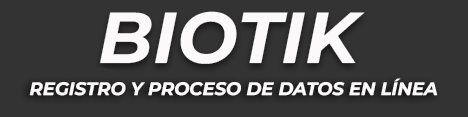
<style>
.page{position:relative;width:468px;height:117px;background:#333333}
.page>*{position:absolute;margin:0}
.t1{font:18px "MontserratItalic-BoldItalic";color:#fbf9f9}
</style>
<div class="page">
<p class="t1" style="left:29px;top:78px;width:409px;height:18px">REGISTRO Y PROCESO DE DATOS EN LÍNEA</p>
</div>
